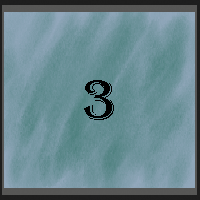
<style>
.page{position:relative;width:200px;height:200px}
.page>*{position:absolute;margin:0}
.t1{font:60px "Algerian";color:#000000}
</style>
<div class="page">
<p class="t1" style="left:84px;top:80px;width:30px;height:40px">3</p>
</div>
